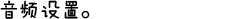
<style>
.page{position:relative;width:232px;height:19px;background:#ffffff}
.page>*{position:absolute;margin:0}
.t1{font:22px "¢è?";color:#000000}
</style>
<div class="page">
<p class="t1" style="left:0px;top:0px;width:90px;height:19px">音频设置。</p>
</div>
